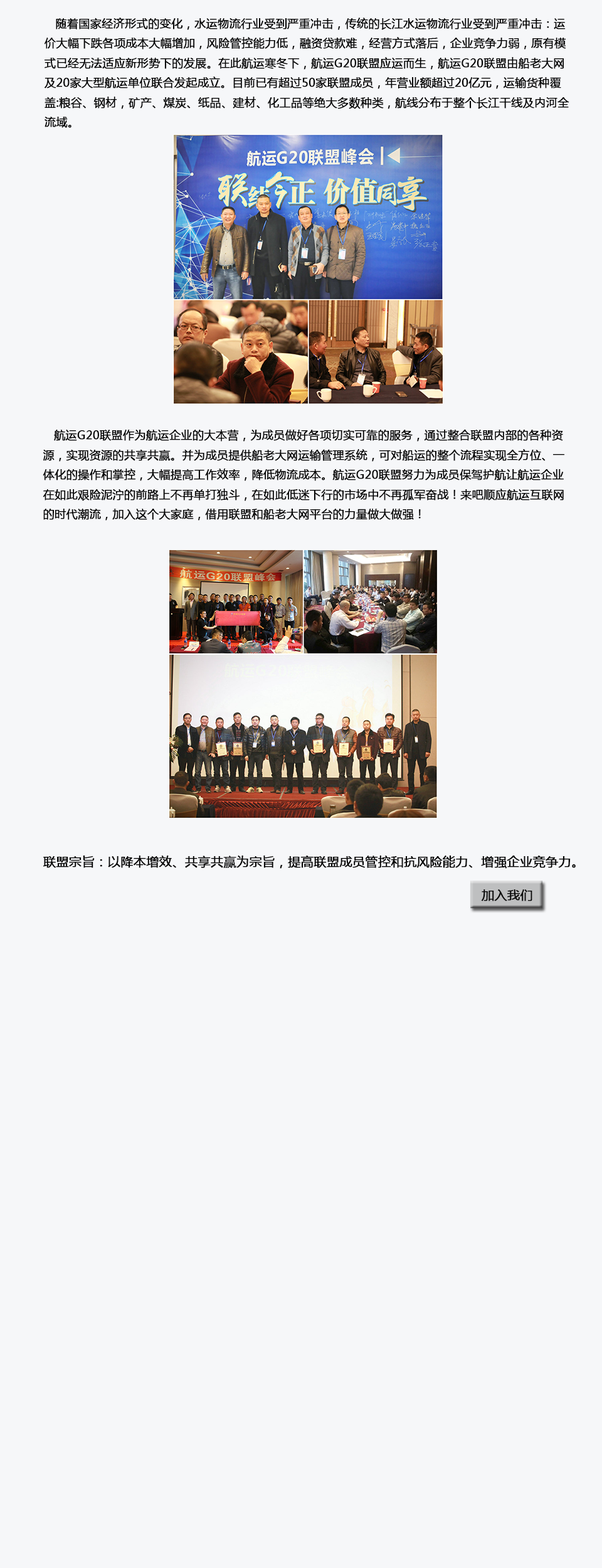
<style>
.page{position:relative;width:602px;height:1568px;background:#f6f7f9}
.page>*{position:absolute;margin:0}
.t1{font:11.3px "MicrosoftYaHei";color:#040404;font-weight:bold}
.t2{font:12.5px "MicrosoftYaHei";color:#040404;font-weight:bold}
.t3{font:12.5px "MicrosoftYaHei";color:#080808;font-weight:bold}
</style>
<div class="page">
<p class="t1" style="left:45px;top:18px;width:524px;height:110px">随着国家经济形式的变化，水运物流行业受到严重冲击，传统的长江水运物流行业受到严重冲击：运<br>价大幅下跌各项成本大幅增加，风险管控能力低，融资贷款难，经营方式落后，企业竞争力弱，原有模<br>式已经无法适应新形势下的发展。在此航运寒冬下，航运G20联盟应运而生，航运G20联盟由船老大网<br>及20家大型航运单位联合发起成立。目前已有超过50家联盟成员，年营业额超过20亿元，运输货种覆<br>盖:粮谷、钢材，矿产、煤炭、纸品、建材、化工品等绝大多数种类，航线分布于整个长江干线及内河全<br>流域。</p>
<p class="t1" style="left:43px;top:430px;width:521px;height:91px">航运G20联盟作为航运企业的大本营，为成员做好各项切实可靠的服务，通过整合联盟内部的各种资<br>源，实现资源的共享共赢。并为成员提供船老大网运输管理系统，可对船运的整个流程实现全方位、一<br>体化的操作和掌控，大幅提高工作效率，降低物流成本。航运G20联盟努力为成员保驾护航让航运企业<br>在如此艰险泥泞的前路上不再单打独斗，在如此低迷下行的市场中不再孤军奋战！来吧顺应航运互联网<br>的时代潮流，加入这个大家庭，借用联盟和船老大网平台的力量做大做强！</p>
<p class="t2" style="left:43px;top:856px;width:533px;height:13px">联盟宗旨：以降本增效、共享共赢为宗旨，提高联盟成员管控和抗风险能力、增强企业竞争力。</p>
<p class="t3" style="left:481px;top:889px;width:51px;height:12px">加入我们</p>
</div>
